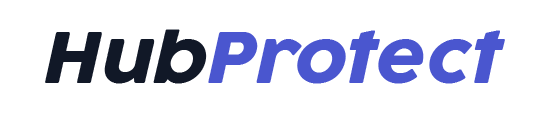
<style>
.page{position:relative;width:540px;height:114px;background:#ffffff}
.page>*{position:absolute;margin:0}
.t1{font:68.4px "CocogoosePro-Italic";color:#4a56cf;scale:1.05 1}
.t2{font:68.4px "CocogoosePro-Italic";color:#111827;scale:1.05 1}
</style>
<div class="page">
<p class="t1" style="left:45px;top:29px;width:460px;height:55px"><span class="t2">Hub</span>Protect</p>
</div>
